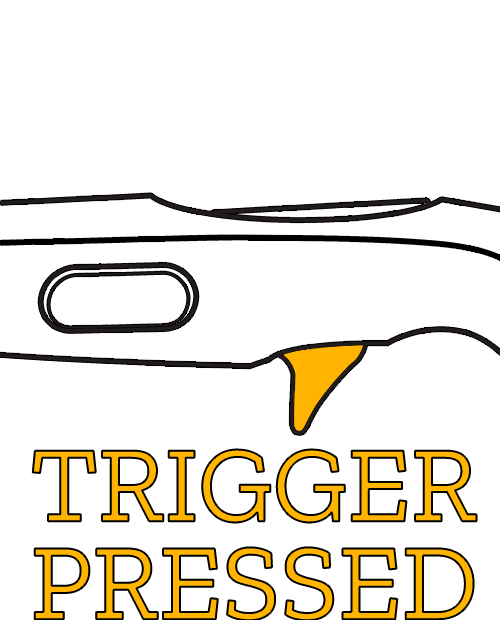
<style>
.page{position:relative;width:500px;height:620px;background:#ffffff}
.page>*{position:absolute;margin:0}
.t1{font:108.3px/97.8px "ZillaSlab-Regular";color:#ffb400}
</style>
<div class="page">
<p class="t1" style="left:32px;top:449px;width:445px;height:172px;text-align:center">TRIGGER<br>PRESSED</p>
</div>
